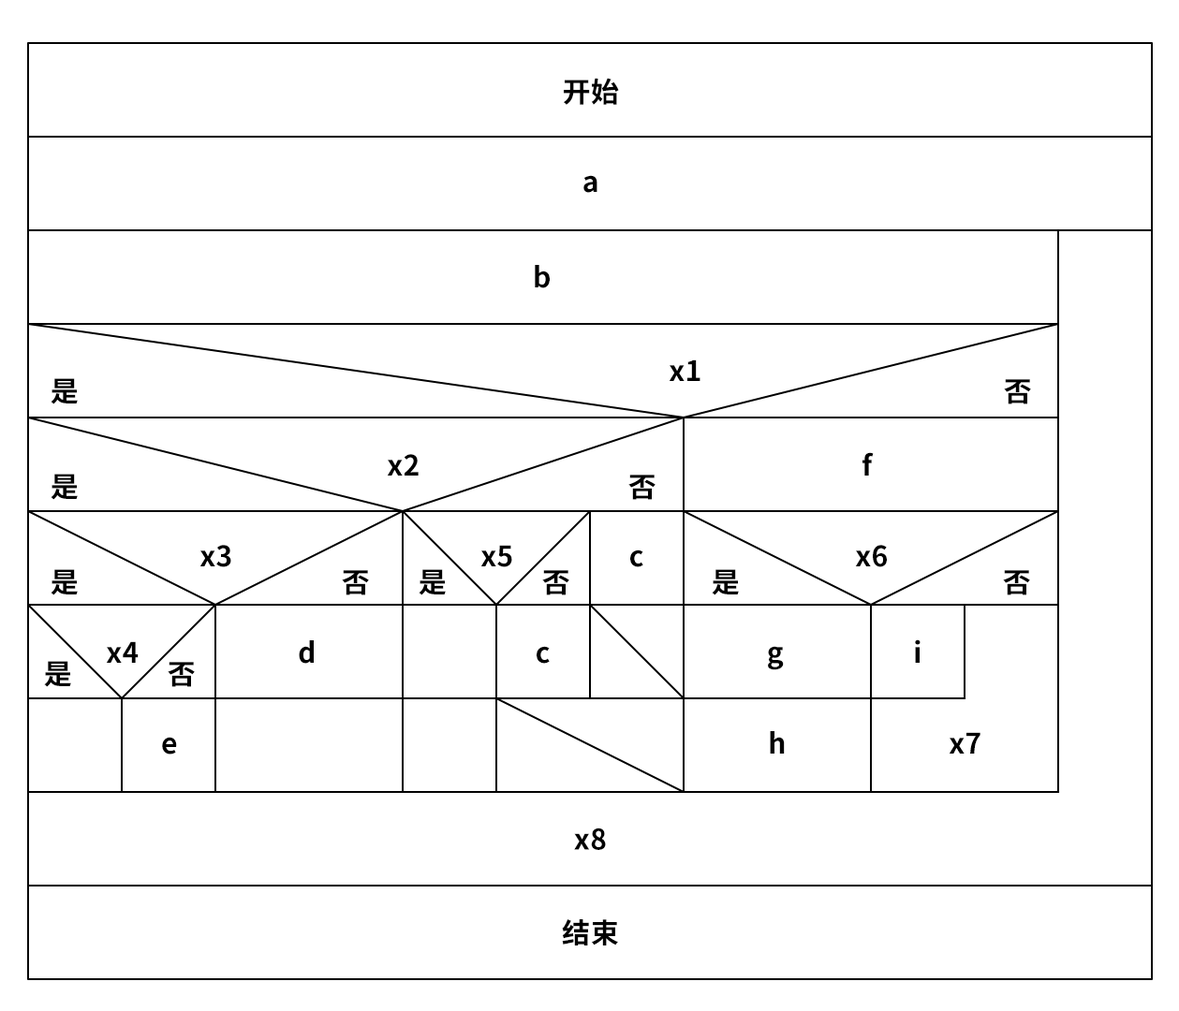
<style>
.page{position:relative;width:1179px;height:1011px;background:#ffffff}
.page>*{position:absolute;margin:0}
.t1{font:28.1px "SourceHanSansCN-Bold";letter-spacing:0.02em;color:#000000}
</style>
<div class="page">
<p class="t1" style="left:564px;top:78px;width:55px;height:27px">开始</p>
<p class="t1" style="left:583px;top:175px;width:14px;height:18px">a</p>
<p class="t1" style="left:535px;top:265px;width:15px;height:23px">b</p>
<p class="t1" style="left:669px;top:360px;width:31px;height:21px">x1</p>
<p class="t1" style="left:51px;top:378px;width:27px;height:27px">是</p>
<p class="t1" style="left:1004px;top:379px;width:27px;height:26px">否</p>
<p class="t1" style="left:387px;top:454px;width:32px;height:22px">x2</p>
<p class="t1" style="left:862px;top:452px;width:12px;height:24px">f</p>
<p class="t1" style="left:51px;top:474px;width:27px;height:26px">是</p>
<p class="t1" style="left:628px;top:475px;width:28px;height:25px">否</p>
<p class="t1" style="left:199px;top:545px;width:32px;height:22px">x3</p>
<p class="t1" style="left:480px;top:545px;width:32px;height:22px">x5</p>
<p class="t1" style="left:855px;top:545px;width:32px;height:22px">x6</p>
<p class="t1" style="left:630px;top:550px;width:13px;height:17px">c</p>
<p class="t1" style="left:51px;top:569px;width:27px;height:27px">是</p>
<p class="t1" style="left:419px;top:569px;width:27px;height:27px">是</p>
<p class="t1" style="left:712px;top:569px;width:27px;height:27px">是</p>
<p class="t1" style="left:342px;top:570px;width:27px;height:26px">否</p>
<p class="t1" style="left:542px;top:570px;width:27px;height:26px">否</p>
<p class="t1" style="left:1003px;top:570px;width:27px;height:26px">否</p>
<p class="t1" style="left:106px;top:641px;width:33px;height:22px">x4</p>
<p class="t1" style="left:299px;top:641px;width:15px;height:23px">d</p>
<p class="t1" style="left:915px;top:640px;width:6px;height:23px">i</p>
<p class="t1" style="left:537px;top:646px;width:13px;height:18px">c</p>
<p class="t1" style="left:768px;top:646px;width:16px;height:25px">g</p>
<p class="t1" style="left:44px;top:661px;width:27px;height:26px">是</p>
<p class="t1" style="left:168px;top:662px;width:27px;height:25px">否</p>
<p class="t1" style="left:162px;top:737px;width:15px;height:18px">e</p>
<p class="t1" style="left:770px;top:731px;width:15px;height:23px">h</p>
<p class="t1" style="left:949px;top:732px;width:31px;height:22px">x7</p>
<p class="t1" style="left:574px;top:828px;width:32px;height:22px">x8</p>
<p class="t1" style="left:562px;top:920px;width:56px;height:26px">结束</p>
</div>
